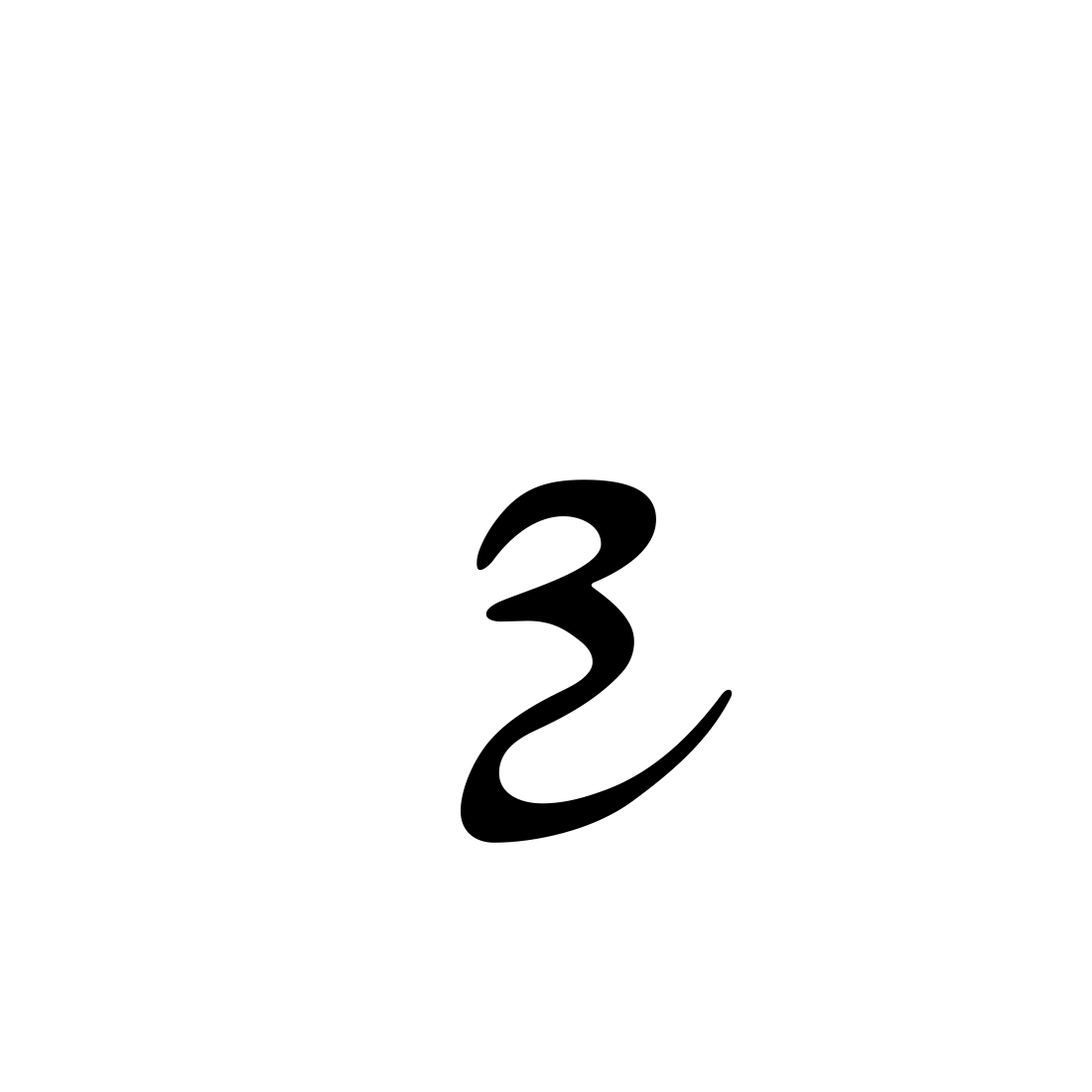
<style>
.page{position:relative;width:1092px;height:1092px;background:#ffffff}
.page>*{position:absolute;margin:0}
.t1{font:337.5px "Joscelyn";color:#000000}
</style>
<div class="page">
<p class="t1" style="left:461px;top:479px;width:272px;height:364px">z</p>
</div>
